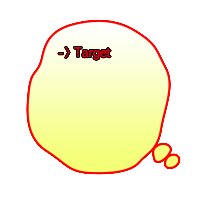
<style>
.page{position:relative;width:200px;height:200px;background:#ffffff}
.page>*{position:absolute;margin:0}
.t1{font:12px "AppleGothic";color:#e10011}
</style>
<div class="page">
<p class="t1" style="left:58px;top:46px;width:53px;height:14px">-&gt; Target</p>
</div>
